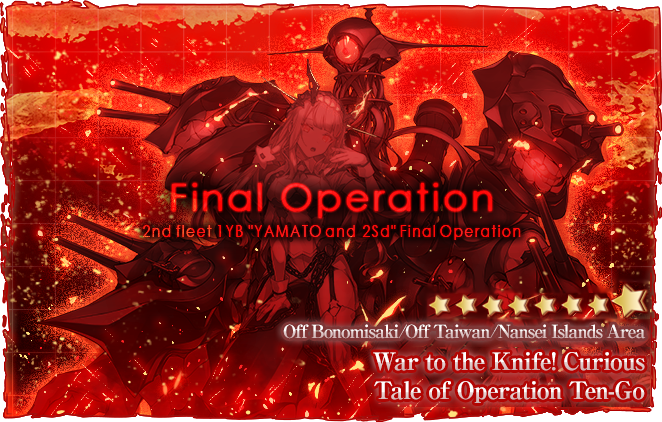
<style>
.page{position:relative;width:662px;height:422px}
.page>*{position:absolute;margin:0}
.t1{font:18px "RyuminPro-ExBold";letter-spacing:-0.08em}
.t2{font:24px "RyuminPro-ExBold";letter-spacing:-0.04em}
</style>
<div class="page">
<p class="t1" style="left:283px;top:324px;width:363px;height:15px">Off Bonomisaki/Off Taiwan/Nansei Islands Area</p>
<p class="t2" style="left:373px;top:352px;width:272px;height:19px">War to the Knife! Curious</p>
<p class="t2" style="left:374px;top:381px;width:271px;height:22px">Tale of Operation Ten-Go</p>
</div>
